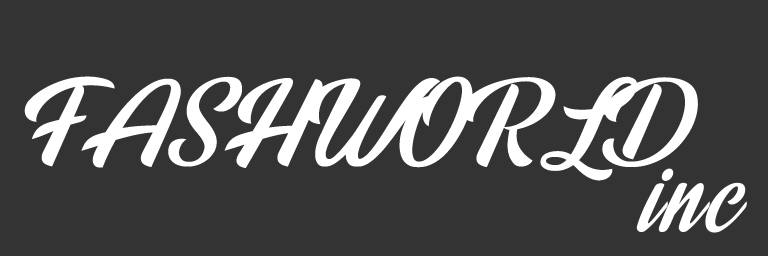
<style>
.page{position:relative;width:768px;height:256px;background:#333333}
.page>*{position:absolute;margin:0}
.t1{font:99.7px "RainbowBridgePersonalUse";letter-spacing:0.04em;color:#ffffff;scale:1.09 1}
</style>
<div class="page">
<p class="t1" style="left:24px;top:76px;width:674px;height:105px">FASHWORLD</p>
<p class="t1" style="left:636px;top:168px;width:111px;height:65px">inc</p>
</div>
